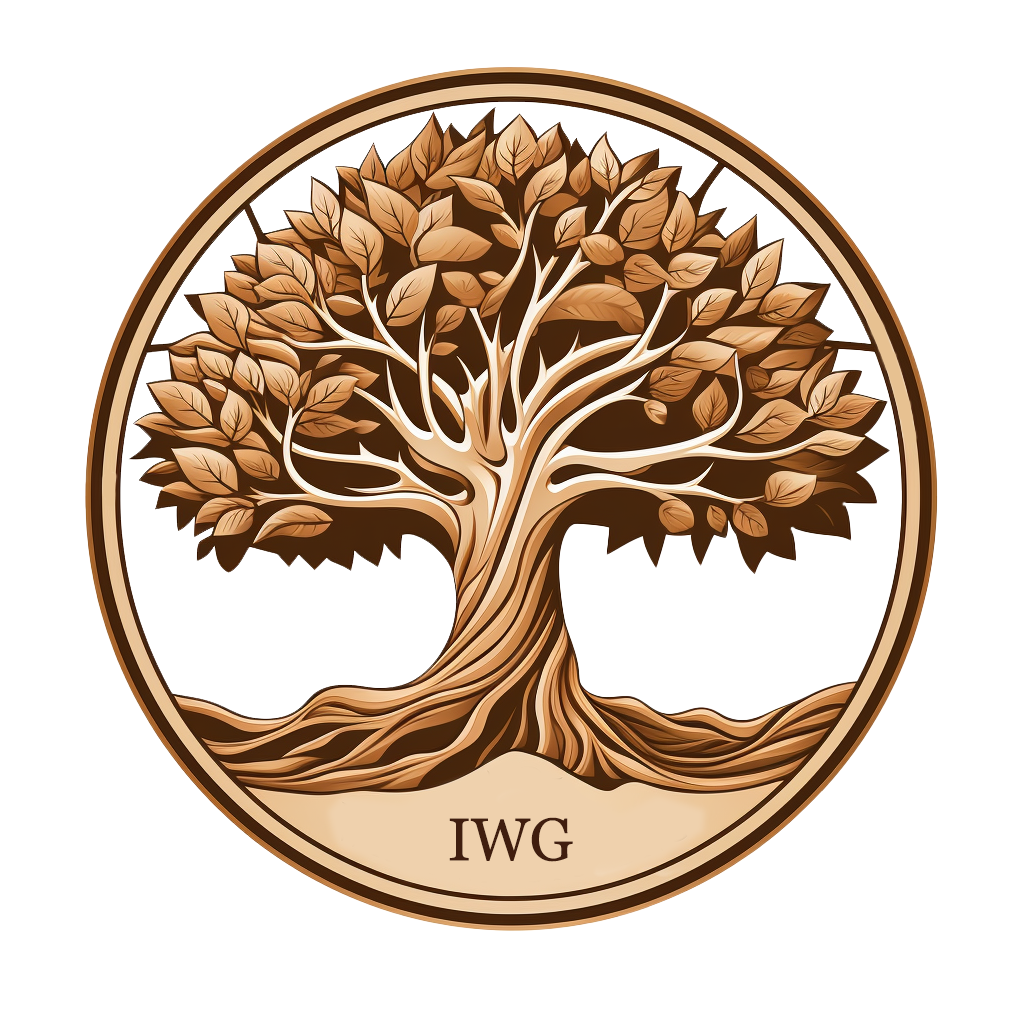
<style>
.page{position:relative;width:1024px;height:1024px;background:#ffffff}
.page>*{position:absolute;margin:0}
.t1{font:60px "Georgia";color:#401e0f}
</style>
<div class="page">
<p class="t1" style="left:449px;top:817px;width:124px;height:45px">IWG</p>
</div>
